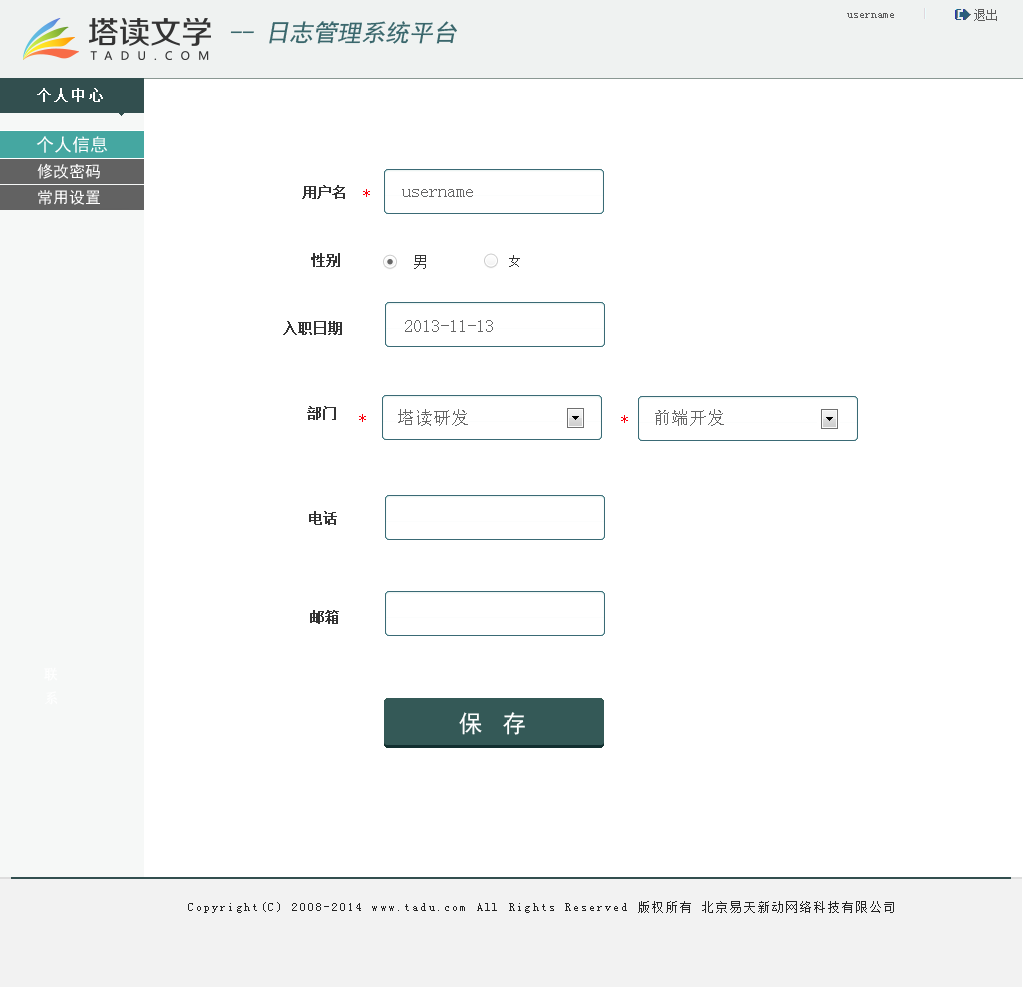
<style>
.page{position:relative;width:1023px;height:987px;background:#ffffff}
.page>*{position:absolute;margin:0}
.t1{font:12px "SimSun";color:#5c5c5c}
.t2{font:24px "SimHei";color:#3a676c;font-style:italic}
.t3{font:14px "SimSun";letter-spacing:0.2em;color:#ffffff;font-weight:bold}
.t4{font:18px "SimHei";color:#ffffff}
.t5{font:16px "SimHei";color:#ffffff}
.t6{font:14px "SimSun";color:#333333;font-weight:bold}
.t7{font:14px "SimSun";color:#fc010d}
.t8{font:18px "SimSun";color:#666666}
.t9{font:14px "SimSun";color:#333333}
.t10{font:12px "SimSun";letter-spacing:0.2em;color:#333333}
.t11{font:14px/12px "SimHei";letter-spacing:-0.05em;color:#ffffff}
.t12{font:14px/12px "SimSun";letter-spacing:0.2em;color:#ffffff}
.t13{font:24px "SimHei";letter-spacing:0.2em;color:#ffffff}
.t14{font:12px "SimSun";letter-spacing:0.2em;color:#252525}
</style>
<div class="page">
<p class="t1" style="left:847px;top:13px;width:47px;height:5px">username</p>
<p class="t1" style="left:974px;top:9px;width:23px;height:12px">退出</p>
<p class="t2" style="left:230px;top:21px;width:227px;height:23px">-- 日志管理系统平台</p>
<p class="t3" style="left:37px;top:88px;width:66px;height:14px">个人中心</p>
<p class="t4" style="left:36px;top:136px;width:72px;height:17px">个人信息</p>
<p class="t5" style="left:37px;top:163px;width:63px;height:16px">修改密码</p>
<p class="t6" style="left:302px;top:185px;width:43px;height:14px">用户名</p>
<p class="t5" style="left:38px;top:190px;width:62px;height:15px">常用设置</p>
<p class="t7" style="left:363px;top:189px;width:7px;height:8px">*</p>
<p class="t8" style="left:402px;top:189px;width:71px;height:8px">username</p>
<p class="t6" style="left:311px;top:253px;width:29px;height:14px">性别</p>
<p class="t9" style="left:414px;top:255px;width:12px;height:14px">男</p>
<p class="t10" style="left:509px;top:255px;width:11px;height:12px">女</p>
<p class="t6" style="left:283px;top:321px;width:59px;height:14px">入职日期</p>
<p class="t8" style="left:405px;top:320px;width:88px;height:12px">2013-11-13</p>
<p class="t6" style="left:307px;top:406px;width:29px;height:14px">部门</p>
<p class="t7" style="left:359px;top:414px;width:7px;height:8px">*</p>
<p class="t8" style="left:398px;top:409px;width:70px;height:17px">塔读研发</p>
<p class="t8" style="left:655px;top:409px;width:69px;height:17px">前端开发</p>
<p class="t7" style="left:621px;top:415px;width:7px;height:8px">*</p>
<p class="t6" style="left:309px;top:511px;width:28px;height:14px">电话</p>
<p class="t6" style="left:310px;top:610px;width:29px;height:14px">邮箱</p>
<p class="t11" style="left:44px;top:667px;width:14px;height:38px">联<br><br><span class="t12">系</span></p>
<p class="t13" style="left:459px;top:712px;width:66px;height:23px">保 存</p>
<p class="t14" style="left:188px;top:901px;width:706px;height:12px">Copyright(C) 2008-2014 www.tadu.com All Rights Reserved 版权所有 北京易天新动网络科技有限公司</p>
</div>
